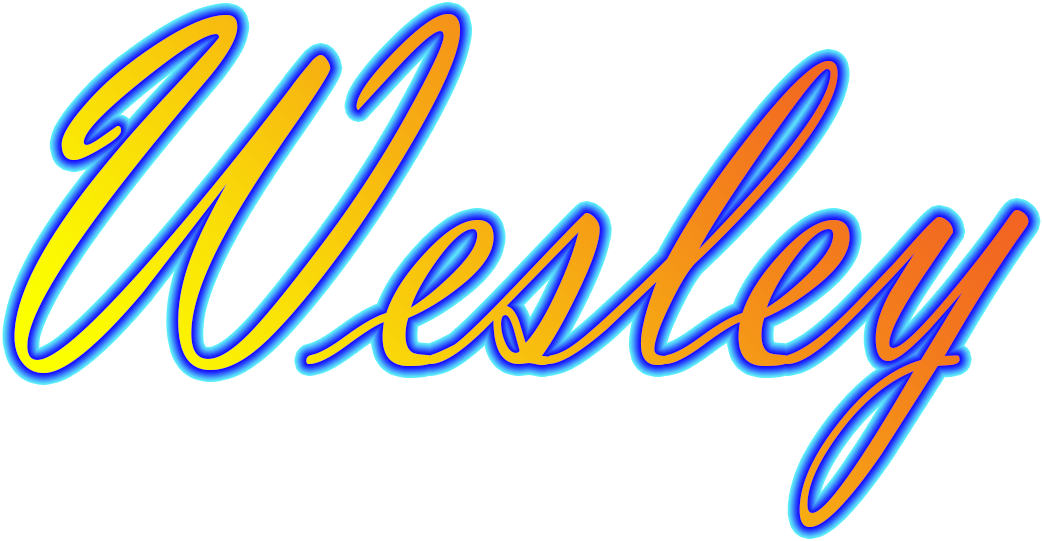
<style>
.page{position:relative;width:1042px;height:541px;background:#ffffff}
.page>*{position:absolute;margin:0}
.t1{font:522.6px "VladimirScript";scale:0.79 1}
</style>
<div class="page">
<p class="t1" style="left:14px;top:14px;width:1015px;height:513px">Wesley</p>
</div>
